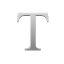
<style>
.page{position:relative;width:64px;height:64px;background:#ffffff}
.page>*{position:absolute;margin:0}
.t1{font:69px "Aparajita";color:#c7c7c7}
</style>
<div class="page">
<p class="t1" style="left:17px;top:12px;width:32px;height:38px">T</p>
</div>
